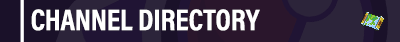
<style>
.page{position:relative;width:400px;height:42px;background:#2c243a}
.page>*{position:absolute;margin:0}
.t1{font:30px "AcuminProCond-Bold";color:#ffffff;text-transform:uppercase}
</style>
<div class="page">
<p class="t1" style="left:31px;top:9px;width:229px;height:22px">Channel Directory</p>
</div>
